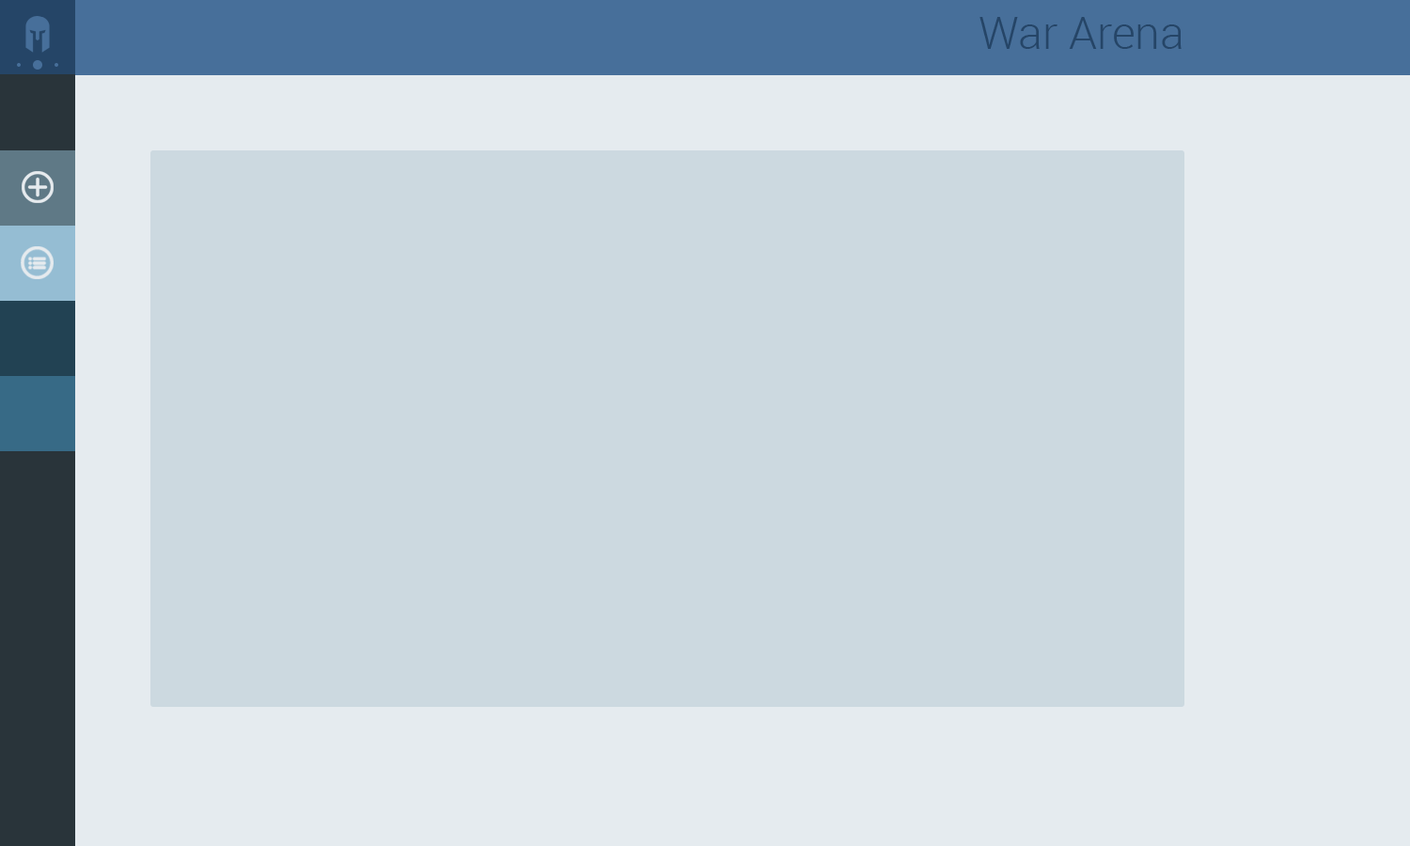
<style>
.page{position:relative;width:1410px;height:846px;background:#ccd9e0}
.page>*{position:absolute;margin:0}
.t1{font:45.1px "Roboto-Light";color:#254567}
</style>
<div class="page">
<p class="t1" style="left:979px;top:17px;width:202px;height:32px">War Arena</p>
</div>
